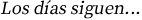
<style>
.page{position:relative;width:142px;height:20px;background:#ffffff}
.page>*{position:absolute;margin:0}
.t1{font:20px "OfficialFateFont-Medium";color:#000000;font-style:italic}
</style>
<div class="page">
<p class="t1" style="left:0px;top:0px;width:140px;height:19px">Los días siguen...</p>
</div>
